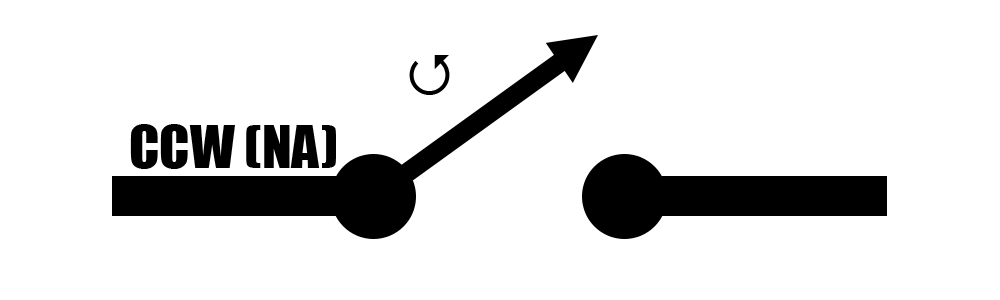
<style>
.page{position:relative;width:1000px;height:300px;background:#ffffff}
.page>*{position:absolute;margin:0}
.t1{font:55px "Impact";color:#000000}
</style>
<div class="page">
<p class="t1" style="left:130px;top:124px;width:206px;height:45px">CCW (NA)</p>
</div>
